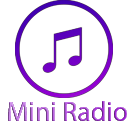
<style>
.page{position:relative;width:128px;height:128px;background:#ffffff}
.page>*{position:absolute;margin:0}
.t1{font:27.6px "MyriadPro-Regular"}
</style>
<div class="page">
<p class="t1" style="left:8px;top:101px;width:119px;height:20px">Mini Radio</p>
</div>
